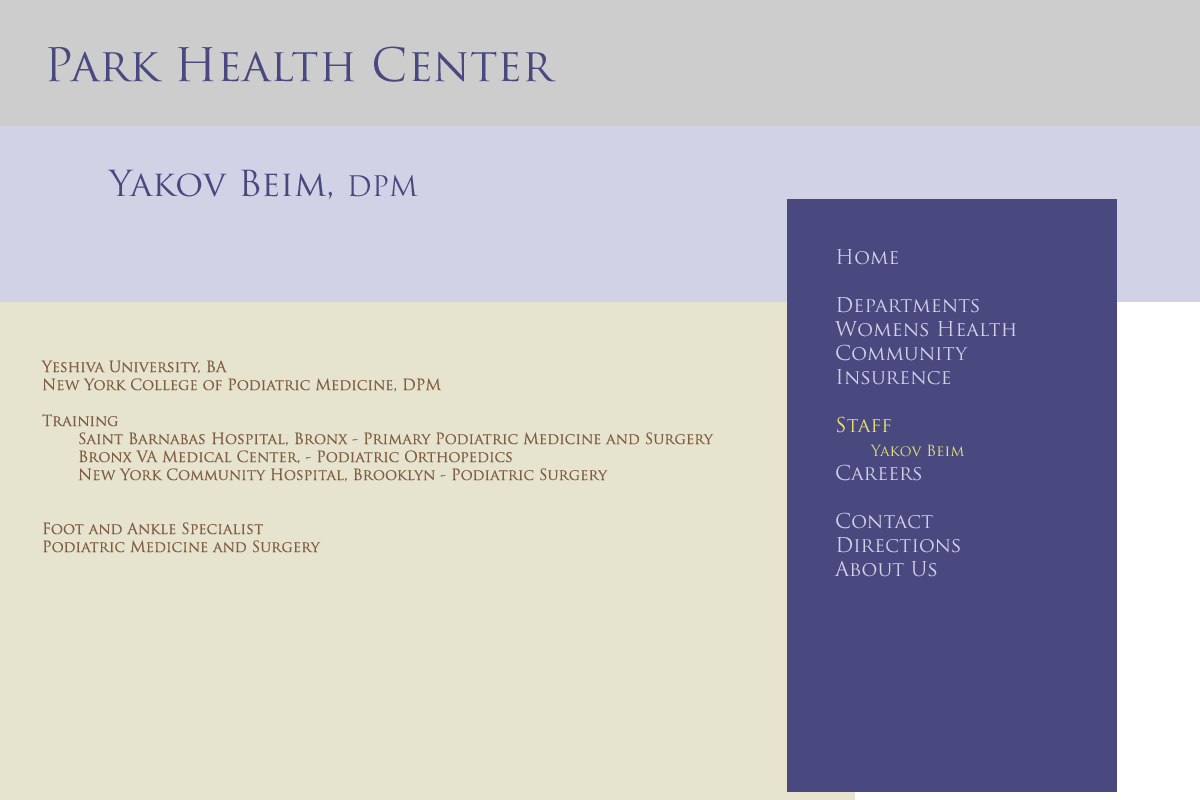
<style>
.page{position:relative;width:1200px;height:800px;background:#e6e3cf}
.page>*{position:absolute;margin:0}
.t1{font:45px "TrajanPro-Regular";color:#494980}
.t2{font:35px "TrajanPro-Regular";color:#494980}
.t3{font:27.5px "TrajanPro-Regular";color:#494980}
.t4{font:20px "TrajanPro-Regular";color:#d2d2e6}
.t5{font:20px "TrajanPro-Regular";color:#e6e073}
.t6{font:15px "TrajanPro-Regular";color:#e6e073}
.t7{font:15px "TrajanPro-Regular";color:#805d40}
</style>
<div class="page">
<p class="t1" style="left:48px;top:46px;width:508px;height:36px">Park Health Center</p>
<p class="t2" style="left:108px;top:169px;width:310px;height:31px">Yakov Beim, <span class="t3">DPM</span></p>
<p class="t4" style="left:834px;top:249px;width:182px;height:328px">Home<br><br>Departments<br>Womens Health<br>Community<br>Insurence<br><br><span class="t5">Staff<br> </span><span class="t6">Yakov Beim<br></span>Careers<br><br>Contact<br>Directions<br>About Us</p>
<p class="t7" style="left:41px;top:360px;width:673px;height:193px">Yeshiva University, BA<br>New York College of Podiatric Medicine, DPM<br><br>Training<br> Saint Barnabas Hospital, Bronx - Primary Podiatric Medicine and Surgery<br> Bronx VA Medical Center, - Podiatric Orthopedics<br> New York Community Hospital, Brooklyn - Podiatric Surgery<br><br><br>Foot and Ankle Specialist<br>Podiatric Medicine and Surgery</p>
</div>
